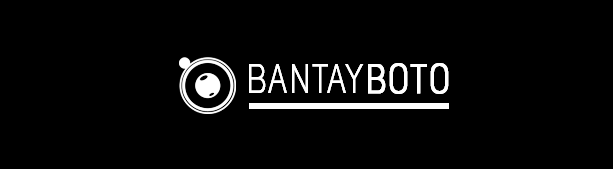
<style>
.page{position:relative;width:613px;height:169px;background:#000000}
.page>*{position:absolute;margin:0}
.t1{font:41.6px "Lintel-Regular";color:#ffffff;scale:0.84 1}
.t2{font:41.6px "Lintel-Regular";color:#ffffff;font-weight:bold;scale:0.84 1}
</style>
<div class="page">
<p class="t1" style="left:249px;top:63px;width:200px;height:31px">BANTAY<span class="t2">BOTO</span></p>
</div>
